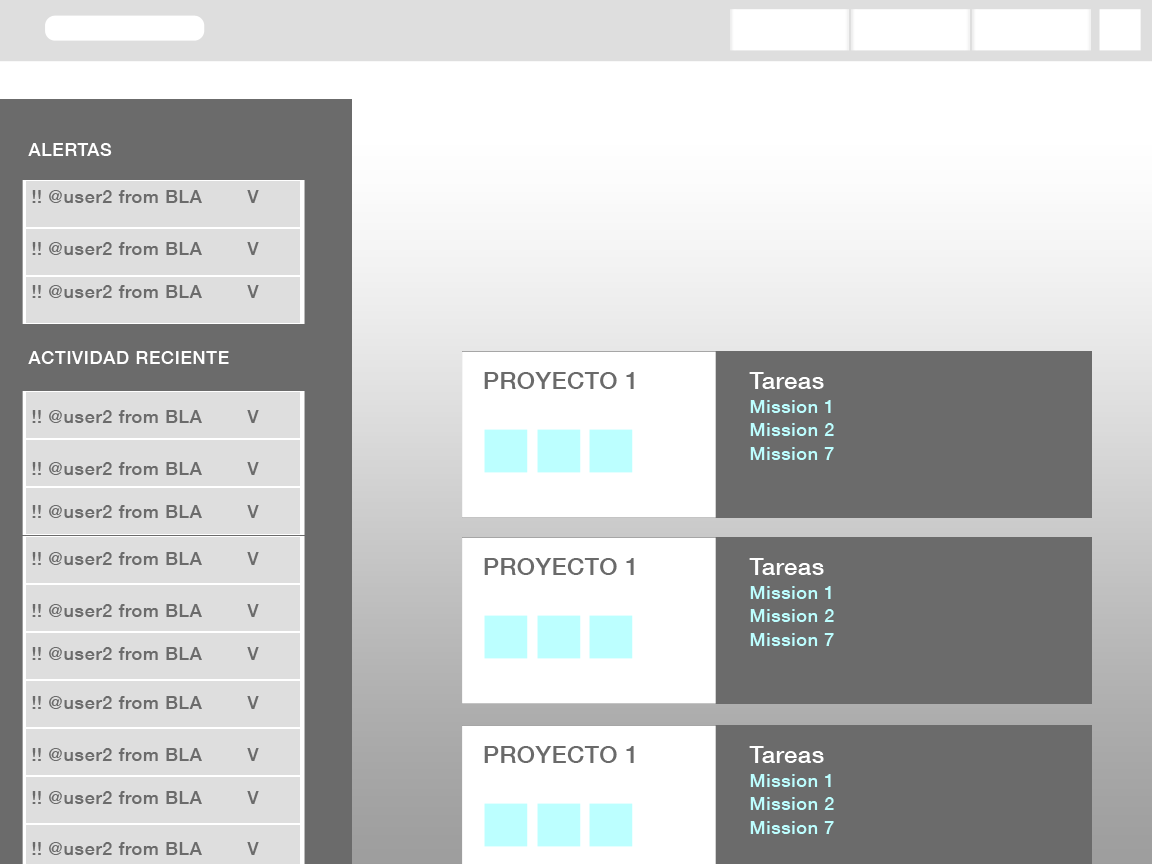
<style>
.page{position:relative;width:1152px;height:864px;background:#6b6b6b}
.page>*{position:absolute;margin:0}
.t1{font:18.5px "HelveticaNeue-Medium";letter-spacing:0.025em;color:#ffffff}
.t2{font:18.5px "HelveticaNeue-Medium";letter-spacing:0.025em;color:#6b6b6b}
.t3{font:23.8px "HelveticaNeue-Medium";letter-spacing:0.025em;color:#6a6a6a}
.t4{font:18.5px/23.8px "HelveticaNeue-Medium";letter-spacing:0.025em;color:#bcfeff}
.t5{font:23.8px/47.5px "HelveticaNeue-Medium";letter-spacing:0.025em;color:#ffffff}
</style>
<div class="page">
<p class="t1" style="left:28px;top:143px;width:84px;height:13px">ALERTAS</p>
<p class="t2" style="left:32px;top:190px;width:227px;height:13px">!! @user2 from BLA    V</p>
<p class="t2" style="left:32px;top:242px;width:227px;height:13px">!! @user2 from BLA  V</p>
<p class="t2" style="left:32px;top:285px;width:227px;height:13px">!! @user2 from BLA  V</p>
<p class="t1" style="left:28px;top:351px;width:201px;height:13px">ACTIVIDAD RECIENTE</p>
<p class="t3" style="left:484px;top:372px;width:150px;height:17px">PROYECTO 1</p>
<p class="t4" style="left:749px;top:372px;width:85px;height:88px"><span class="t5">Tareas<br></span>Mission 1<br>Mission 2<br>Mission 7</p>
<p class="t2" style="left:32px;top:410px;width:227px;height:13px">!! @user2 from BLA    V</p>
<p class="t2" style="left:32px;top:462px;width:227px;height:13px">!! @user2 from BLA  V</p>
<p class="t2" style="left:32px;top:505px;width:227px;height:13px">!! @user2 from BLA  V</p>
<p class="t2" style="left:32px;top:552px;width:227px;height:13px">!! @user2 from BLA    V</p>
<p class="t3" style="left:484px;top:558px;width:150px;height:17px">PROYECTO 1</p>
<p class="t4" style="left:749px;top:558px;width:85px;height:88px"><span class="t5">Tareas<br></span>Mission 1<br>Mission 2<br>Mission 7</p>
<p class="t2" style="left:32px;top:604px;width:227px;height:13px">!! @user2 from BLA  V</p>
<p class="t2" style="left:32px;top:647px;width:227px;height:13px">!! @user2 from BLA  V</p>
<p class="t2" style="left:32px;top:696px;width:227px;height:13px">!! @user2 from BLA    V</p>
<p class="t2" style="left:32px;top:748px;width:227px;height:13px">!! @user2 from BLA  V</p>
<p class="t3" style="left:484px;top:746px;width:150px;height:17px">PROYECTO 1</p>
<p class="t4" style="left:749px;top:746px;width:85px;height:88px"><span class="t5">Tareas<br></span>Mission 1<br>Mission 2<br>Mission 7</p>
<p class="t2" style="left:32px;top:791px;width:227px;height:13px">!! @user2 from BLA  V</p>
<p class="t2" style="left:32px;top:842px;width:227px;height:13px">!! @user2 from BLA  V</p>
</div>
